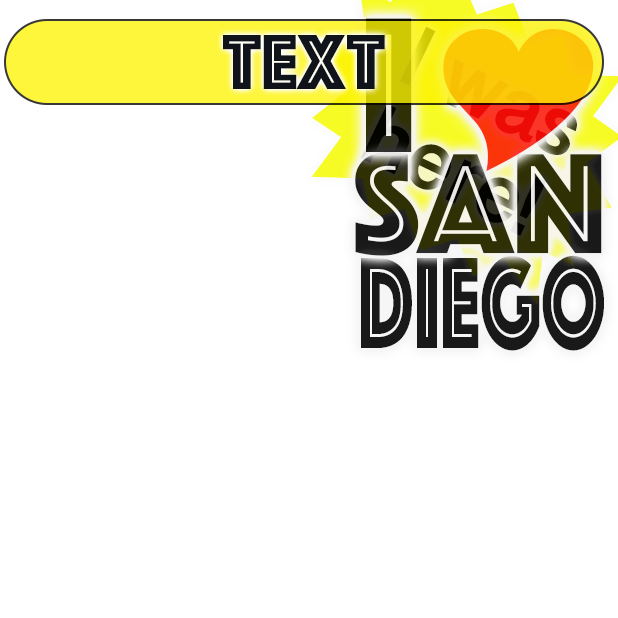
<style>
.page{position:relative;width:618px;height:618px;background:#ffffff}
.page>*{position:absolute;margin:0}
.t1{font:200px "Phosphate-Inline"}
.t2{font:200px "Webdings"}
.t3{font:81px "Phosphate-Inline";color:#101319}
.t4{font:147.6px "Phosphate-Inline"}
.t5{font:134.7px "Phosphate-Inline";color:#191919;scale:0.65 1}
</style>
<div class="page">
<p class="t1" style="left:366px;top:18px;width:228px;height:153px">I<span class="t2">Y</span></p>
<p class="t3" style="left:223px;top:35px;width:162px;height:54px">TEXT</p>
<p class="t4" style="left:355px;top:151px;width:247px;height:105px">SAn</p>
<p class="t5" style="left:361px;top:255px;width:243px;height:96px">Diego</p>
</div>
